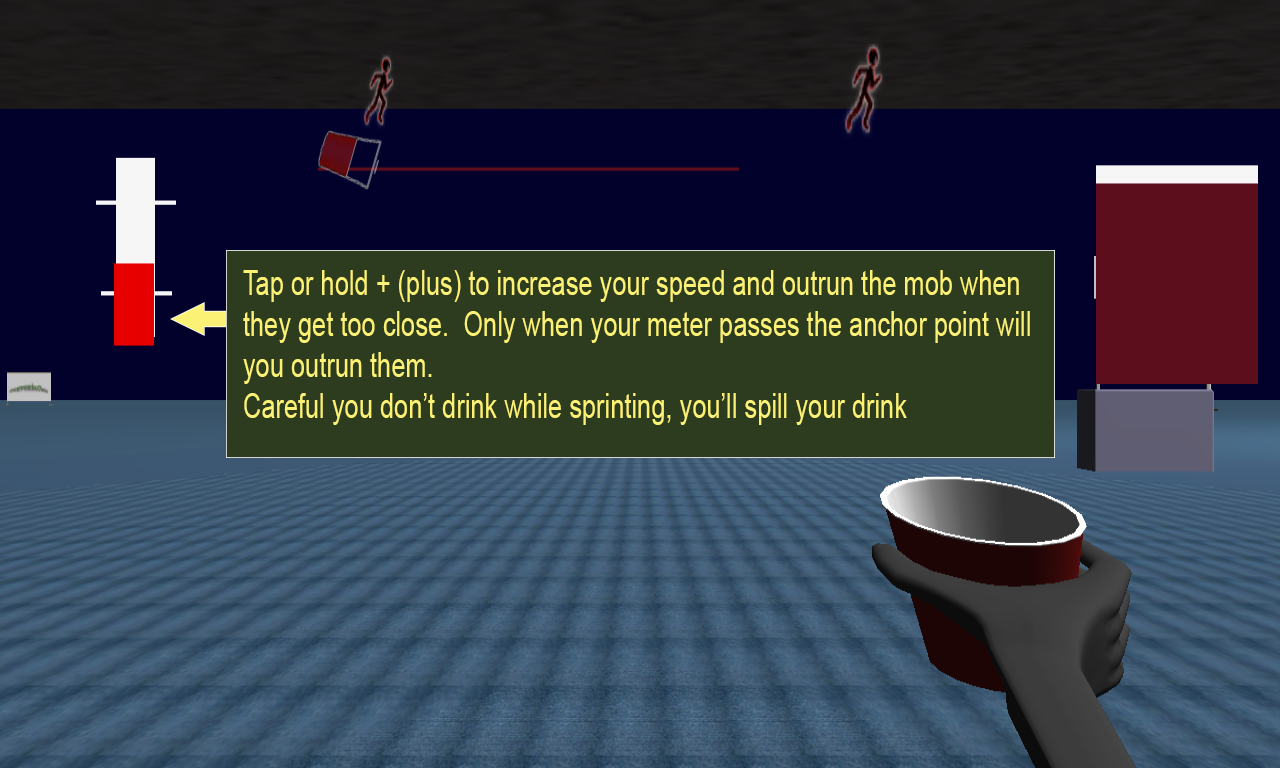
<style>
.page{position:relative;width:1280px;height:768px;background:#01012b}
.page>*{position:absolute;margin:0}
.t1{font:34px "ArialMT";color:#fbf174;scale:0.75 1}
</style>
<div class="page">
<p class="t1" style="left:243px;top:270px;width:787px;height:155px">Tap or hold + (plus) to increase your speed and outrun the mob when <br>they get too close.  Only when your meter passes the anchor point will you outrun them.<br>Careful you don’t drink while sprinting, you’ll spill your drink</p>
</div>
